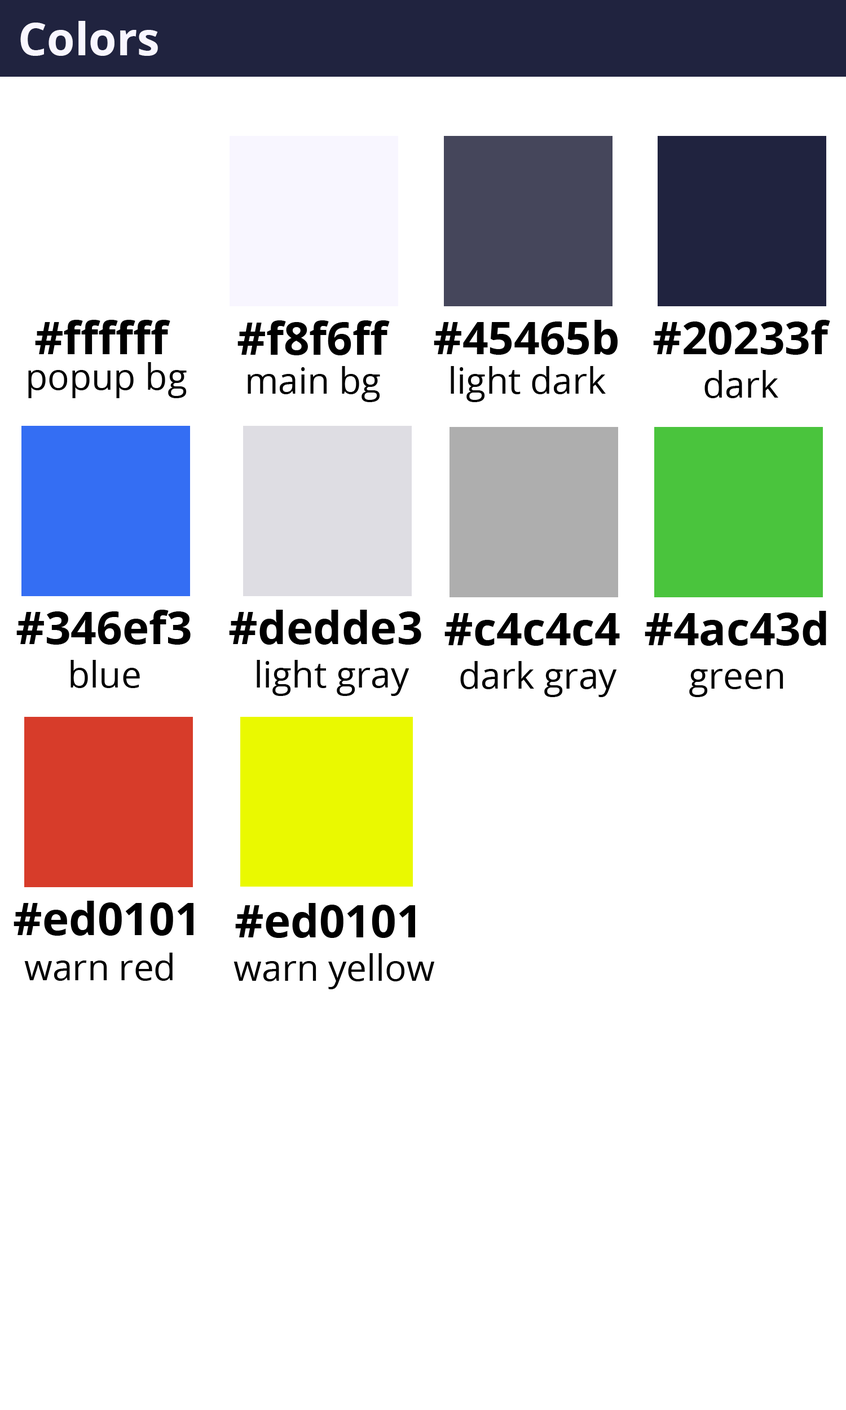
<style>
.page{position:relative;width:846px;height:1410px;background:#ffffff}
.page>*{position:absolute;margin:0}
.t1{font:45.1px "OpenSans-Bold";color:#f8f6ff}
.t2{font:45.1px "OpenSans-Bold";color:#000000}
.t3{font:36.1px "OpenSans";color:#000000}
.t4{font:36.1px "OpenSans-Regular";color:#000000}
</style>
<div class="page">
<p class="t1" style="left:20px;top:21px;width:138px;height:35px">Colors</p>
<p class="t2" style="left:35px;top:320px;width:135px;height:34px">#ffffff</p>
<p class="t2" style="left:237px;top:320px;width:153px;height:35px">#f8f6ff</p>
<p class="t2" style="left:434px;top:320px;width:183px;height:35px">#45465b</p>
<p class="t2" style="left:653px;top:320px;width:177px;height:35px">#20233f</p>
<p class="t3" style="left:28px;top:362px;width:159px;height:36px">popup bg</p>
<p class="t3" style="left:248px;top:366px;width:132px;height:36px">main bg</p>
<p class="t3" style="left:451px;top:366px;width:155px;height:36px">light dark</p>
<p class="t3" style="left:704px;top:370px;width:74px;height:28px">dark</p>
<p class="t2" style="left:16px;top:610px;width:175px;height:35px">#346ef3</p>
<p class="t2" style="left:229px;top:610px;width:192px;height:35px">#dedde3</p>
<p class="t2" style="left:444px;top:613px;width:176px;height:33px">#c4c4c4</p>
<p class="t2" style="left:645px;top:611px;width:181px;height:35px">#4ac43d</p>
<p class="t3" style="left:70px;top:660px;width:70px;height:28px">blue</p>
<p class="t3" style="left:257px;top:660px;width:152px;height:36px">light gray</p>
<p class="t3" style="left:460px;top:661px;width:157px;height:36px">dark gray</p>
<p class="t3" style="left:689px;top:669px;width:94px;height:28px">green</p>
<p class="t2" style="left:14px;top:901px;width:179px;height:35px">#ed0101</p>
<p class="t2" style="left:235px;top:903px;width:180px;height:35px">#ed0101</p>
<p class="t4" style="left:24px;top:952px;width:149px;height:29px">warn red</p>
<p class="t4" style="left:233px;top:953px;width:201px;height:36px">warn yellow</p>
</div>
